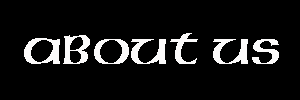
<style>
.page{position:relative;width:300px;height:100px;background:#000000}
.page>*{position:absolute;margin:0}
.t1{font:53.3px "Herald";color:#fcfbfb}
</style>
<div class="page">
<p class="t1" style="left:24px;top:33px;width:255px;height:31px">about us</p>
</div>
